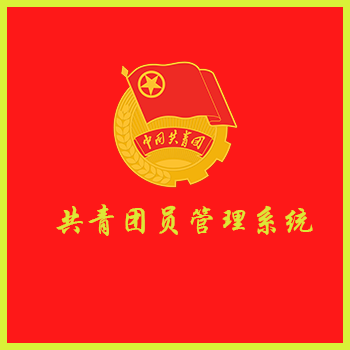
<style>
.page{position:relative;width:350px;height:350px;background:#fe1818}
.page>*{position:absolute;margin:0}
.t1{font:32.6px "STXingkai";color:#d9f138}
</style>
<div class="page">
<p class="t1" style="left:56px;top:204px;width:257px;height:32px">共青团员管理系统</p>
</div>
